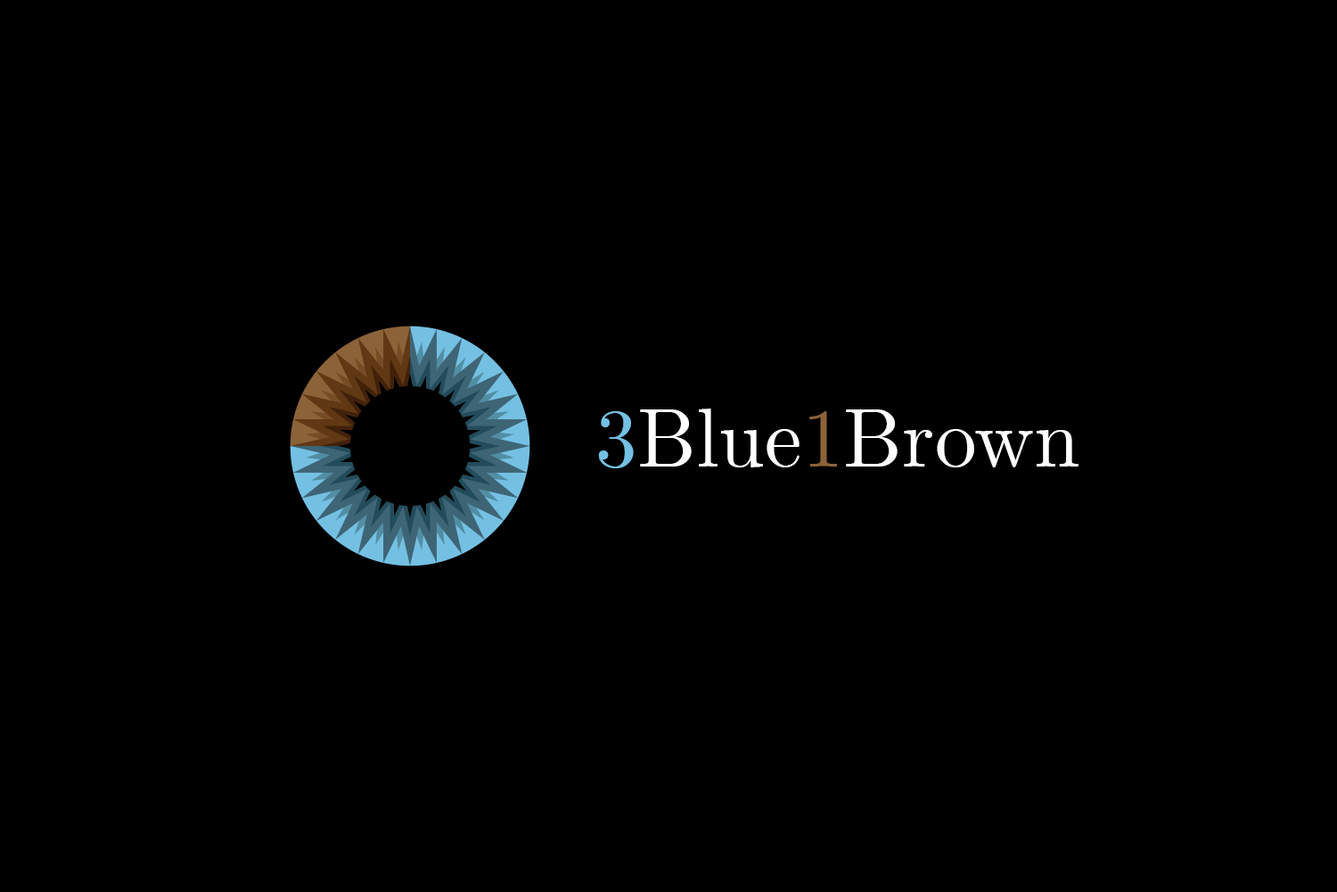
<style>
.page{position:relative;width:1337px;height:892px;background:#000000}
.page>*{position:absolute;margin:0}
.t1{font:83.2px "CMUSerif-Roman";color:#ffffff}
.t2{font:83.2px "CMUSerif-Roman";color:#74c0e3}
.t3{font:83.2px "CMUSerif-Roman";color:#8c6239}
</style>
<div class="page">
<p class="t1" style="left:598px;top:408px;width:481px;height:60px"><span class="t2">3</span>Blue<span class="t3">1</span>Brown</p>
</div>
